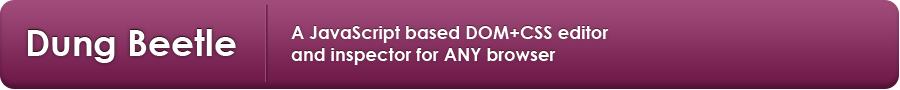
<style>
.page{position:relative;width:900px;height:90px}
.page>*{position:absolute;margin:0}
.t1{font:36px "CenturyGothic-Bold";color:#ffffff}
.t2{font:18px "CenturyGothic-Bold";color:#ffffff}
</style>
<div class="page">
<p class="t1" style="left:28px;top:29px;width:208px;height:34px">Dung Beetle</p>
<p class="t2" style="left:291px;top:26px;width:318px;height:39px">A JavaScript based DOM+CSS editor<br>and inspector for ANY browser</p>
</div>
